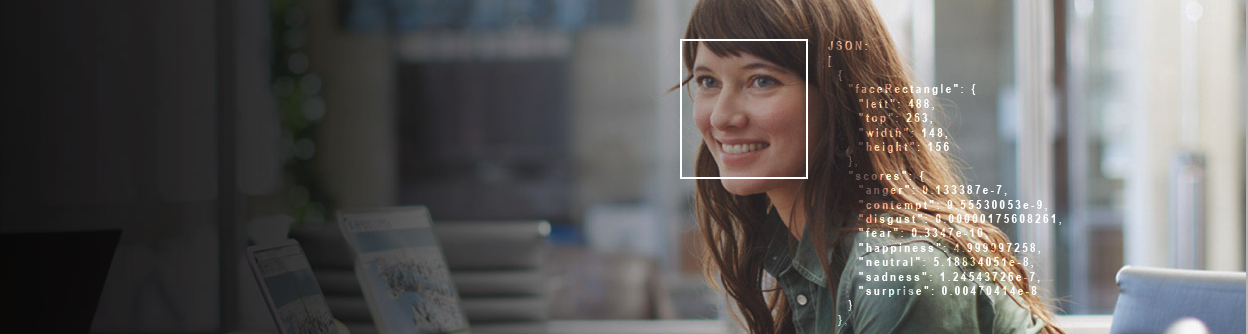
<style>
.page{position:relative;width:1248px;height:334px}
.page>*{position:absolute;margin:0}
.t1{font:12px "ArialNarrow-Bold";letter-spacing:0.2em;color:#ffffff}
</style>
<div class="page">
<p class="t1" style="left:828px;top:41px;width:233px;height:285px">JSON:<br>[<br>  {<br>    "faceRectangle": {<br>      "left": 488,<br>      "top": 263,<br>      "width": 148,<br>      "height": 156<br>    },<br>    "scores": {<br>      "anger": 0.133387e-7,<br>      "contempt": 9.55530053e-9,<br>      "disgust": 0.00000175608261,<br>      "fear": 0.3347e-10,<br>      "happiness": 4.999997258,<br>      "neutral": 5.18834051e-8,<br>      "sadness": 1.24543726e-7,<br>      "surprise": 0.00470414e-8<br>    }<br>  },</p>
</div>
